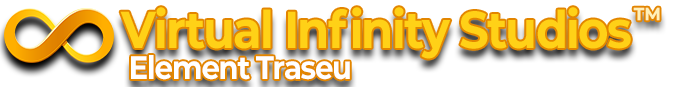
<style>
.page{position:relative;width:700px;height:87px;background:#ffffff}
.page>*{position:absolute;margin:0}
.t1{font:51.8px "Montserrat-Bold";letter-spacing:-0.04em;color:#ffd117;scale:0.9 1}
.t2{font:30.4px "Montserrat-Bold";letter-spacing:-0.04em;color:#fff1b9;scale:0.89 1}
.t3{font:32.4px "Montserrat-Bold";letter-spacing:-0.04em;color:#ffffff;scale:0.9 1}
</style>
<div class="page">
<p class="t1" style="left:120px;top:7px;width:511px;height:52px">Virtual Infinity Studios</p>
<p class="t2" style="left:633px;top:7px;width:27px;height:14px">™</p>
<p class="t3" style="left:131px;top:55px;width:219px;height:25px">Element Traseu</p>
</div>
